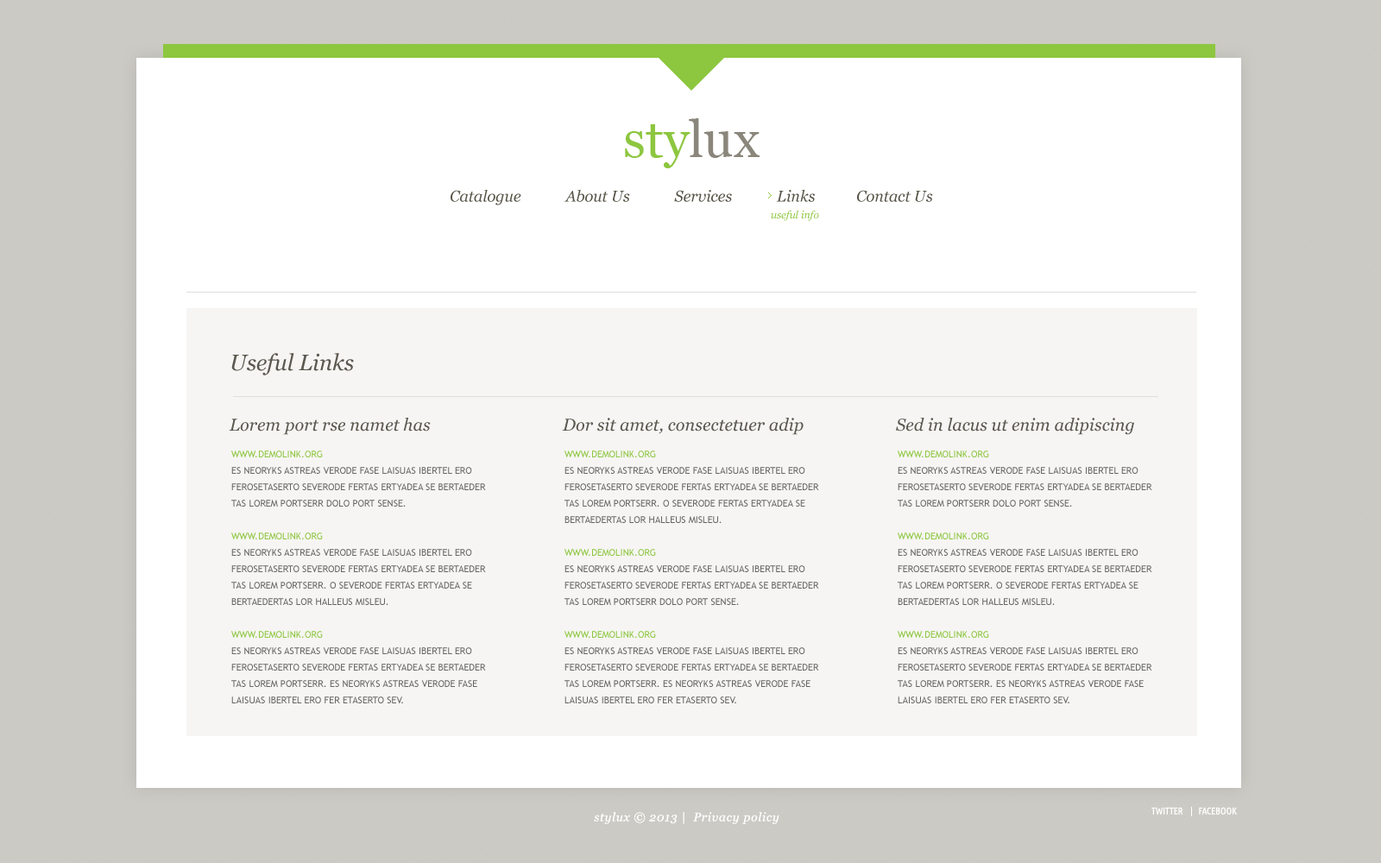
<style>
.page{position:relative;width:1381px;height:863px;background:#ffffff}
.page>*{position:absolute;margin:0}
.t1{font:51.8px "Georgia";color:#8dc63f}
.t2{font:51.8px "Georgia";color:#8a867b}
.t3{font:15.5px "Georgia-Italic";color:#565246}
.t4{font:10.4px "Georgia-Italic";color:#8dc63f}
.t5{font:22.4px "Georgia-Italic";color:#5b5850}
.t6{font:17.3px "Georgia-Italic";color:#5b5850}
.t7{font:9.5px/16.4px "TrebuchetMS";color:#666666;text-transform:uppercase}
.t8{font:9.5px/16.4px "TrebuchetMS";color:#282722;text-transform:uppercase}
.t9{font:9.5px/16.4px "TrebuchetMS";color:#8dc63f;text-transform:uppercase}
.t10{font:9.5px "UbuntuCondensed-Regular";color:#ffffff;text-transform:uppercase}
.t11{font:12.1px "Georgia-Italic";letter-spacing:0.05em;color:#ffffff}
</style>
<div class="page">
<p class="t1" style="left:625px;top:118px;width:135px;height:50px">sty<span class="t2">lux</span></p>
<p class="t3" style="left:451px;top:190px;width:482px;height:15px">Catalogue            About Us            Services            Links           Contact Us</p>
<p class="t4" style="left:771px;top:211px;width:48px;height:10px">useful info</p>
<p class="t5" style="left:231px;top:353px;width:123px;height:23px">Useful Links</p>
<p class="t6" style="left:229px;top:418px;width:202px;height:17px"><span class="t5"><br></span>Lorem port rse namet has</p>
<p class="t6" style="left:562px;top:418px;width:242px;height:17px"><span class="t5"><br></span>Dor sit amet, consectetuer adip</p>
<p class="t6" style="left:896px;top:418px;width:238px;height:17px"><span class="t5"><br></span>Sed in lacus ut enim adipiscing</p>
<p class="t7" style="left:231px;top:451px;width:255px;height:253px"><span class="t8"><br></span><span class="t9">www.demolink.org<br></span>es neoryks astreas verode fase laisuas ibertel ero ferosetaserto severode fertas ertyadea se bertaeder tas lorem portserr dolo port sense.<br><br><span class="t9">www.demolink.org<br></span>es neoryks astreas verode fase laisuas ibertel ero ferosetaserto severode fertas ertyadea se bertaeder tas lorem portserr. o severode fertas ertyadea se bertaedertas lor halleus misleu.<br><br><span class="t9">www.demolink.org<br></span>es neoryks astreas verode fase laisuas ibertel ero ferosetaserto severode fertas ertyadea se bertaeder tas lorem portserr. es neoryks astreas verode fase laisuas ibertel ero fer etaserto sev.<br><br>erode fertas ertyadea se bertaedertas lorem portserr.</p>
<p class="t7" style="left:565px;top:451px;width:254px;height:253px"><span class="t8"><br></span><span class="t9">www.demolink.org<br></span>es neoryks astreas verode fase laisuas ibertel ero ferosetaserto severode fertas ertyadea se bertaeder tas lorem portserr. o severode fertas ertyadea se bertaedertas lor halleus misleu.<br><br><span class="t9">www.demolink.org<br></span>es neoryks astreas verode fase laisuas ibertel ero ferosetaserto severode fertas ertyadea se bertaeder tas lorem portserr dolo port sense.<br><br><span class="t9">www.demolink.org<br></span>es neoryks astreas verode fase laisuas ibertel ero ferosetaserto severode fertas ertyadea se bertaeder tas lorem portserr. es neoryks astreas verode fase laisuas ibertel ero fer etaserto sev.<br><br>erode fertas ertyadea se bertaedertas lorem portserr.</p>
<p class="t7" style="left:898px;top:451px;width:254px;height:253px"><span class="t8"><br></span><span class="t9">www.demolink.org<br></span>es neoryks astreas verode fase laisuas ibertel ero ferosetaserto severode fertas ertyadea se bertaeder tas lorem portserr dolo port sense.<br><br><span class="t9">www.demolink.org<br></span>es neoryks astreas verode fase laisuas ibertel ero ferosetaserto severode fertas ertyadea se bertaeder tas lorem portserr. o severode fertas ertyadea se bertaedertas lor halleus misleu.<br><br><span class="t9">www.demolink.org<br></span>es neoryks astreas verode fase laisuas ibertel ero ferosetaserto severode fertas ertyadea se bertaeder tas lorem portserr. es neoryks astreas verode fase laisuas ibertel ero fer etaserto sev.<br><br>erode fertas ertyadea se bertaedertas lorem portserr.</p>
<p class="t10" style="left:1152px;top:806px;width:85px;height:11px">twitter    |   facebook</p>
<p class="t11" style="left:594px;top:812px;width:186px;height:12px">stylux © 2013 |  Privacy policy</p>
</div>
